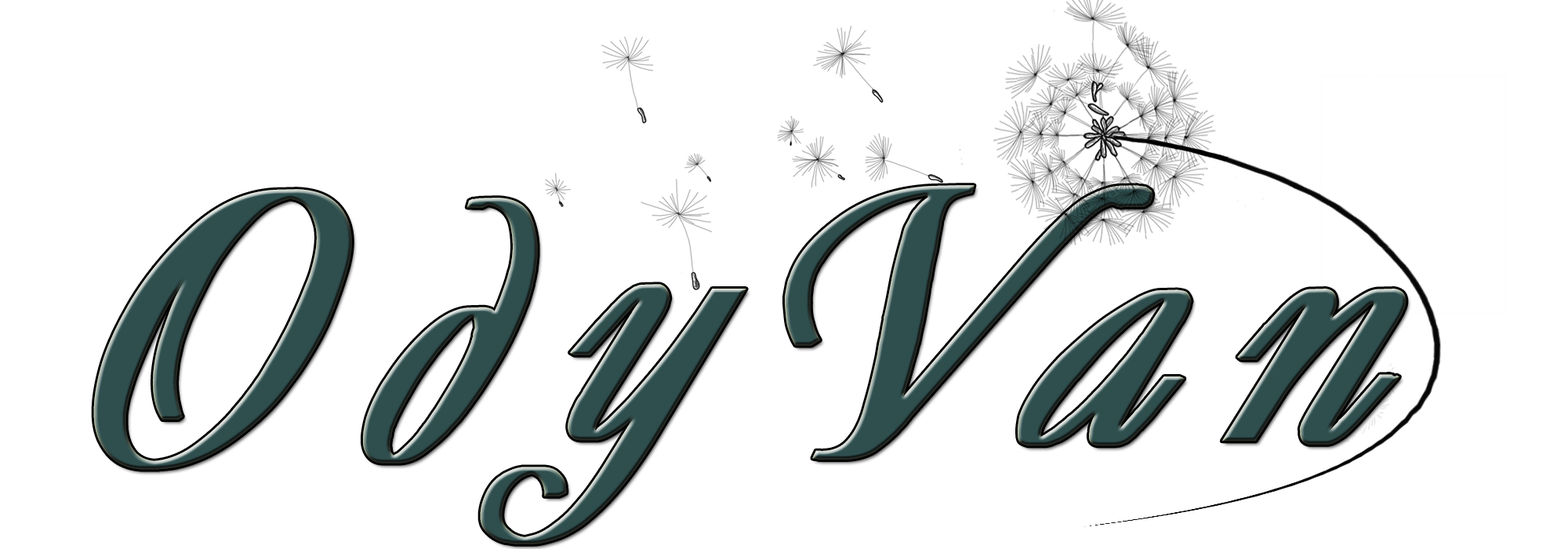
<style>
.page{position:relative;width:1568px;height:549px;background:#ffffff}
.page>*{position:absolute;margin:0}
.t1{font:392px "Decor-BoldItalic";color:#2f4f4f}
</style>
<div class="page">
<p class="t1" style="left:785px;top:185px;width:368px;height:274px">V</p>
<p class="t1" style="left:93px;top:189px;width:259px;height:281px">O</p>
<p class="t1" style="left:363px;top:198px;width:175px;height:265px">д</p>
<p class="t1" style="left:480px;top:284px;width:266px;height:260px">y</p>
<p class="t1" style="left:1018px;top:289px;width:174px;height:157px">a</p>
</div>
